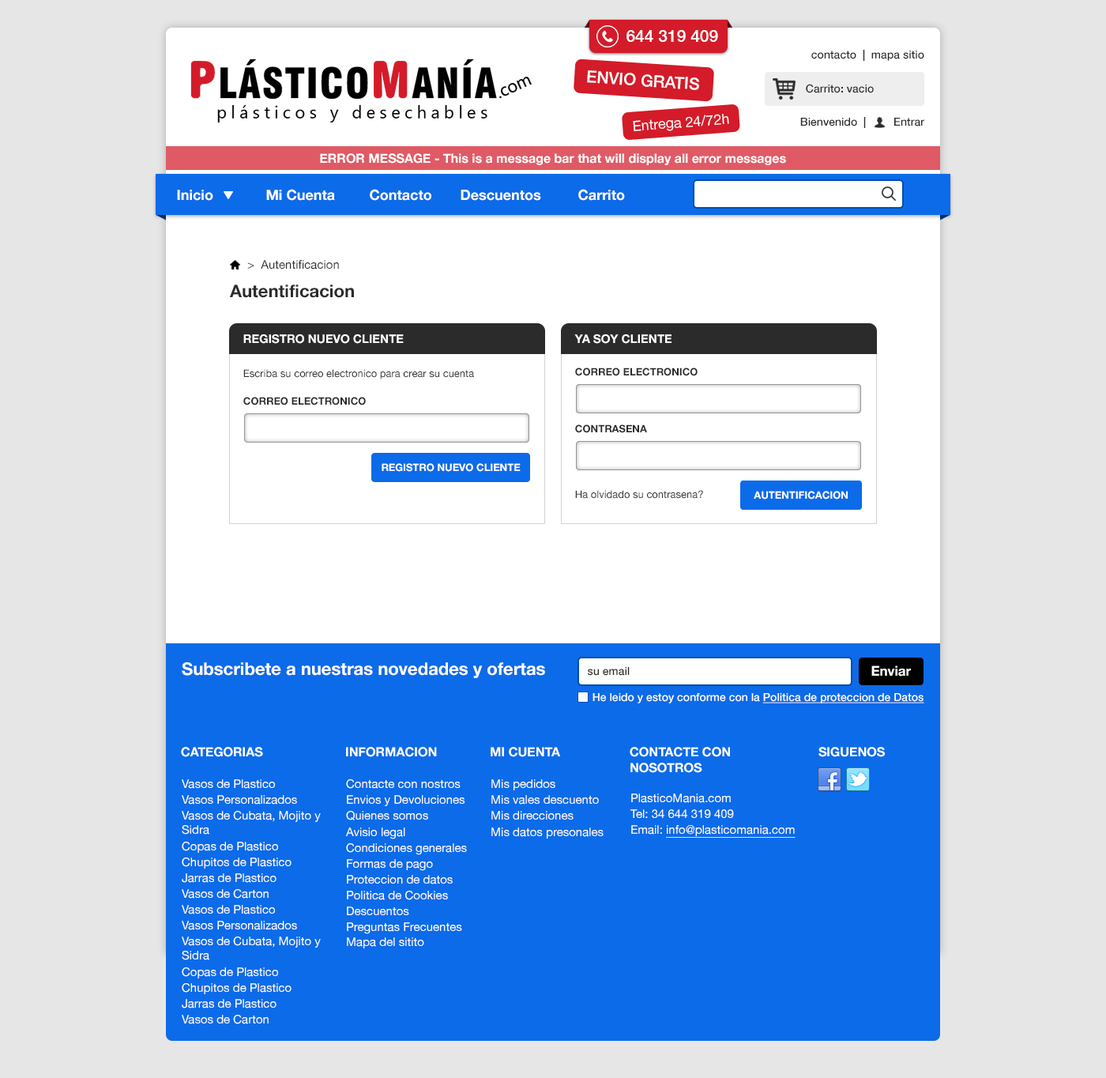
<style>
.page{position:relative;width:1106px;height:1078px;background:#e7e6e6}
.page>*{position:absolute;margin:0}
.t1{font:16.6px "HelveticaNeue-Medium";color:#fefefe}
.t2{font:11.1px "HelveticaNeue-Medium";color:#2b2b2b}
.t3{font:14.2px "HelveticaNeue";color:#fefefe}
.t4{font:12.6px "HelveticaNeue-Bold";color:#ffffff}
.t5{font:14.2px "HelveticaNeue-Bold";color:#ffffff}
.t6{font:11.9px "HelveticaNeue";color:#2b2b2b}
.t7{font:17.4px "HelveticaNeue-Bold";color:#2b2b2b}
.t8{font:11.9px "HelveticaNeue-Bold";color:#ffffff;text-transform:uppercase}
.t9{font:10.3px "HelveticaNeue";color:#2b2b2b}
.t10{font:10.3px "HelveticaNeue-Bold";color:#2b2b2b;text-transform:uppercase}
.t11{font:10.3px "HelveticaNeue-Bold";color:#ffffff;text-transform:uppercase}
.t12{font:17.4px "HelveticaNeue-Bold";color:#ffffff}
.t13{font:13.4px "HelveticaNeue-Bold";color:#ffffff}
.t14{font:11.1px "HelveticaNeue-Medium";color:#ffffff}
.t15{font:11.1px "HelveticaNeue-Medium";color:#ffffff;text-decoration:underline}
.t16{font:12.6px "HelveticaNeue-Bold";color:#ffffff;text-transform:uppercase}
.t17{font:11.9px "HelveticaNeue";color:#ffffff}
.t18{font:11.9px "HelveticaNeue";color:#ffffff;text-decoration:underline}
</style>
<div class="page">
<p class="t1" style="left:627px;top:30px;width:91px;height:12px">644 319 409</p>
<p class="t2" style="left:812px;top:50px;width:113px;height:11px">contacto  |  mapa sitio</p>
<p class="t1" style="left:587px;top:70px;width:112px;height:20px;rotate:4deg">ENVIO GRATIS</p>
<p class="t2" style="left:806px;top:84px;width:68px;height:9px">Carrito: vacio</p>
<p class="t3" style="left:633px;top:114px;width:96px;height:17px;rotate:-4deg">Entrega 24/72h</p>
<p class="t2" style="left:800px;top:117px;width:125px;height:11px">Bienvenido  |         Entrar</p>
<p class="t4" style="left:320px;top:153px;width:466px;height:12px">ERROR MESSAGE - This is a message bar that will display all error messages</p>
<p class="t5" style="left:177px;top:190px;width:36px;height:11px">Inicio</p>
<p class="t5" style="left:266px;top:189px;width:69px;height:12px">Mi Cuenta</p>
<p class="t5" style="left:370px;top:189px;width:61px;height:12px">Contacto</p>
<p class="t5" style="left:461px;top:190px;width:80px;height:11px">Descuentos</p>
<p class="t5" style="left:578px;top:189px;width:47px;height:12px">Carrito</p>
<p class="t6" style="left:247px;top:260px;width:92px;height:9px">&gt;  Autentificacion</p>
<p class="t7" style="left:229px;top:284px;width:125px;height:14px">Autentificacion</p>
<p class="t8" style="left:243px;top:334px;width:161px;height:10px">Registro Nuevo Cliente</p>
<p class="t8" style="left:574px;top:334px;width:98px;height:10px">Ya Soy Cliente</p>
<p class="t9" style="left:243px;top:369px;width:231px;height:10px">Escriba su correo electronico para crear su cuenta</p>
<p class="t10" style="left:575px;top:367px;width:123px;height:9px">Correo Electronico</p>
<p class="t10" style="left:243px;top:397px;width:123px;height:8px">Correo Electronico</p>
<p class="t10" style="left:575px;top:424px;width:72px;height:9px">Contrasena</p>
<p class="t11" style="left:382px;top:463px;width:139px;height:9px">Registro Nuevo Cliente</p>
<p class="t9" style="left:575px;top:490px;width:128px;height:9px">Ha olvidado su contrasena?</p>
<p class="t11" style="left:754px;top:491px;width:94px;height:8px">Autentificacion</p>
<p class="t12" style="left:182px;top:662px;width:363px;height:16px">Subscribete a nuestras novedades y ofertas</p>
<p class="t13" style="left:872px;top:665px;width:39px;height:11px">Enviar</p>
<p class="t2" style="left:588px;top:667px;width:42px;height:9px">su email</p>
<p class="t14" style="left:593px;top:693px;width:332px;height:10px">He leido y estoy conforme con la <span class="t15">Politica de proteccion de Datos</span></p>
<p class="t16" style="left:181px;top:747px;width:82px;height:10px">Categorias</p>
<p class="t16" style="left:346px;top:747px;width:91px;height:10px">Informacion</p>
<p class="t16" style="left:491px;top:747px;width:69px;height:10px">Mi Cuenta</p>
<p class="t16" style="left:630px;top:747px;width:100px;height:26px">Contacte Con<br>Nosotros</p>
<p class="t16" style="left:819px;top:747px;width:66px;height:10px">Siguenos</p>
<p class="t17" style="left:182px;top:779px;width:93px;height:10px">Vasos de Plastico</p>
<p class="t17" style="left:346px;top:779px;width:115px;height:10px">Contacte con nostros</p>
<p class="t17" style="left:492px;top:779px;width:64px;height:11px">Mis pedidos</p>
<p class="t17" style="left:182px;top:795px;width:115px;height:9px">Vasos Personalizados</p>
<p class="t17" style="left:347px;top:795px;width:118px;height:11px">Envios y Devoluciones</p>
<p class="t17" style="left:492px;top:795px;width:107px;height:9px">Mis vales descuento</p>
<p class="t17" style="left:631px;top:793px;width:100px;height:10px">PlasticoMania.com</p>
<p class="t17" style="left:631px;top:809px;width:103px;height:9px">Tel: 34 644 319 409</p>
<p class="t17" style="left:182px;top:811px;width:139px;height:23px">Vasos de Cubata, Mojito y Sidra</p>
<p class="t17" style="left:346px;top:811px;width:82px;height:9px">Quienes somos</p>
<p class="t17" style="left:492px;top:811px;width:82px;height:8px">Mis direcciones</p>
<p class="t17" style="left:346px;top:827px;width:59px;height:12px">Avisio legal</p>
<p class="t17" style="left:492px;top:827px;width:112px;height:11px">Mis datos presonales</p>
<p class="t18" style="left:631px;top:825px;width:165px;height:13px"><span class="t17">Email: </span>info@plasticomania.com</p>
<p class="t17" style="left:182px;top:842px;width:96px;height:11px">Copas de Plastico</p>
<p class="t17" style="left:346px;top:843px;width:121px;height:12px">Condiciones generales</p>
<p class="t17" style="left:182px;top:857px;width:110px;height:11px">Chupitos de Plastico</p>
<p class="t17" style="left:347px;top:859px;width:86px;height:12px">Formas de pago</p>
<p class="t17" style="left:182px;top:873px;width:95px;height:10px">Jarras de Plastico</p>
<p class="t17" style="left:347px;top:875px;width:106px;height:9px">Proteccion de datos</p>
<p class="t17" style="left:182px;top:889px;width:87px;height:9px">Vasos de Carton</p>
<p class="t17" style="left:347px;top:891px;width:101px;height:9px">Politica de Cookies</p>
<p class="t17" style="left:182px;top:905px;width:93px;height:9px">Vasos de Plastico</p>
<p class="t17" style="left:347px;top:906px;width:62px;height:9px">Descuentos</p>
<p class="t17" style="left:182px;top:921px;width:115px;height:9px">Vasos Personalizados</p>
<p class="t17" style="left:347px;top:922px;width:115px;height:12px">Preguntas Frecuentes</p>
<p class="t17" style="left:182px;top:936px;width:139px;height:24px">Vasos de Cubata, Mojito y Sidra</p>
<p class="t17" style="left:347px;top:937px;width:77px;height:11px">Mapa del sitito</p>
<p class="t17" style="left:182px;top:967px;width:96px;height:11px">Copas de Plastico</p>
<p class="t17" style="left:182px;top:983px;width:110px;height:11px">Chupitos de Plastico</p>
<p class="t17" style="left:182px;top:999px;width:95px;height:9px">Jarras de Plastico</p>
<p class="t17" style="left:182px;top:1015px;width:87px;height:9px">Vasos de Carton</p>
</div>
